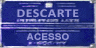
<style>
.page{position:relative;width:96px;height:48px}
.page>*{position:absolute;margin:0}
.t1{font:12px "Calibri-Bold";letter-spacing:0.04em;color:#9ea0dc;scale:1.15 1}
.t2{font:9.2px "Arial-BoldMT";letter-spacing:0.01em;color:#9ea0dc;scale:1.09 1}
</style>
<div class="page">
<p class="t1" style="left:17px;top:9px;width:62px;height:9px;opacity:0.9">DESCARTE</p>
<p class="t2" style="left:26px;top:33px;width:43px;height:7px;opacity:0.9">ACESSO</p>
</div>
